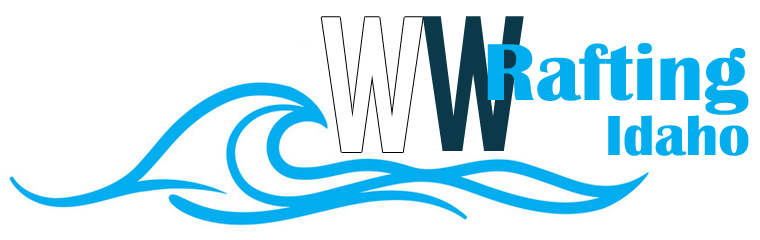
<style>
.page{position:relative;width:760px;height:240px;background:#ffffff}
.page>*{position:absolute;margin:0}
.t1{font:187.5px "BigNoodleTitling";color:#0b394a}
.t2{font:83.3px "BritannicBold";color:#00aeef}
.t3{font:58.3px "BritannicBold";color:#00aeef}
</style>
<div class="page">
<p class="t1" style="left:422px;top:16px;width:102px;height:135px">W</p>
<p class="t2" style="left:487px;top:43px;width:262px;height:72px">Rafting</p>
<p class="t3" style="left:608px;top:115px;width:141px;height:41px">Idaho</p>
</div>
